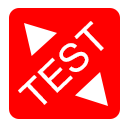
<style>
.page{position:relative;width:128px;height:128px;background:#ff0000}
.page>*{position:absolute;margin:0}
.t1{font:40px "ArialMT";color:#ffffff}
</style>
<div class="page">
<p class="t1" style="left:18px;top:21px;width:86px;height:84px;rotate:-44deg">TEST</p>
</div>
